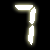
<style>
.page{position:relative;width:50px;height:50px;background:#000000}
.page>*{position:absolute;margin:0}
.t1{font:55px "LiquidCrystal";color:#ffffff}
</style>
<div class="page">
<p class="t1" style="left:15px;top:5px;width:21px;height:40px">7</p>
</div>
